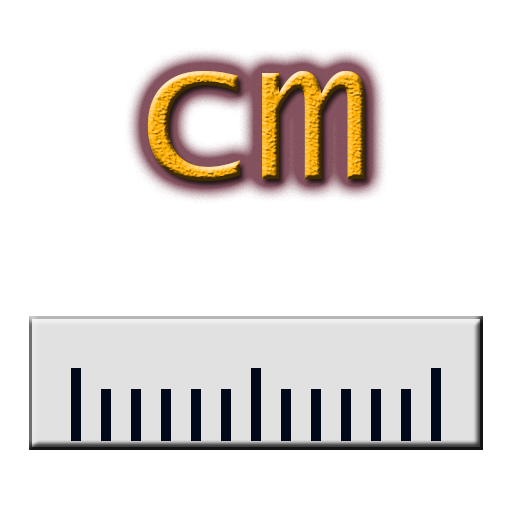
<style>
.page{position:relative;width:512px;height:512px;background:#ffffff}
.page>*{position:absolute;margin:0}
.t1{font:200px "LucidaConsole"}
</style>
<div class="page">
<p class="t1" style="left:147px;top:71px;width:218px;height:110px">cm</p>
</div>
